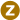
<style>
.page{position:relative;width:20px;height:20px;background:#a57300}
.page>*{position:absolute;margin:0}
.t1{font:14.3px "HelveticaNeue-Bold";color:#ffffff;text-transform:uppercase}
</style>
<div class="page">
<p class="t1" style="left:5px;top:5px;width:10px;height:11px">Z</p>
</div>
